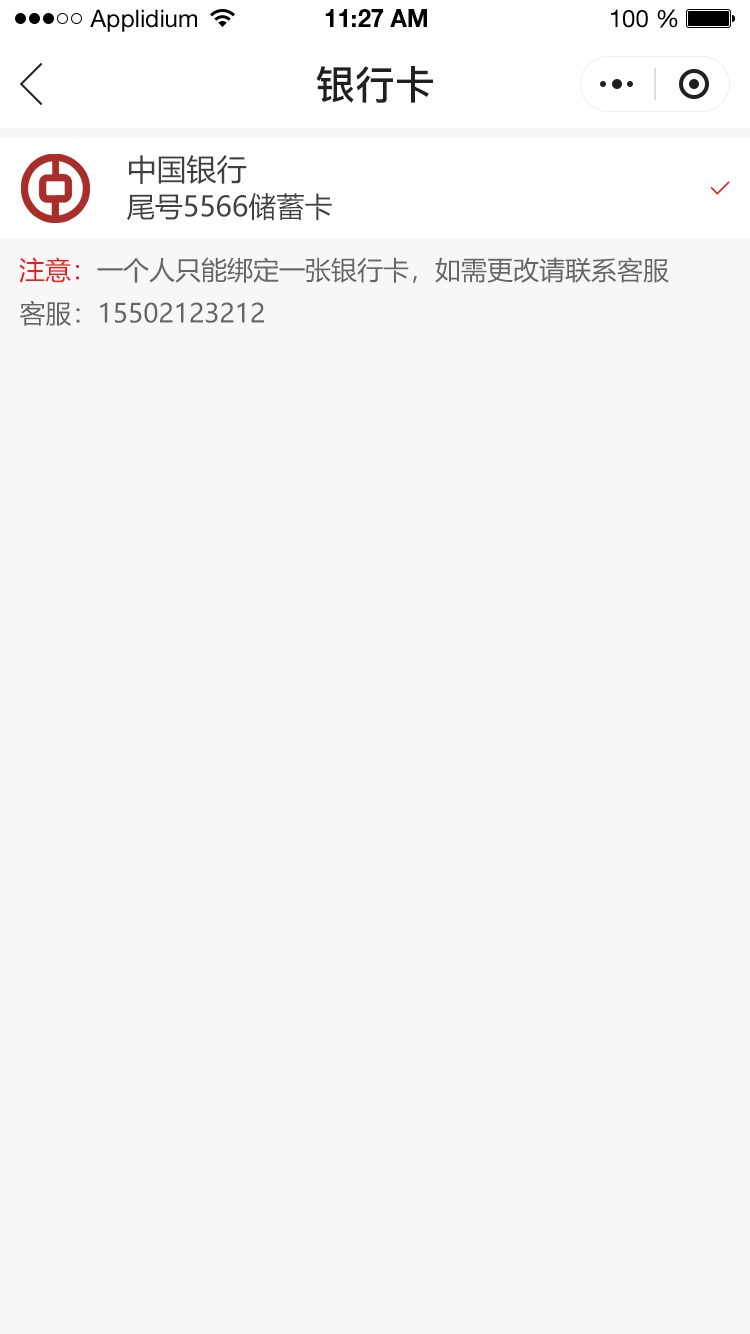
<style>
.page{position:relative;width:750px;height:1334px;background:#f7f7f7}
.page>*{position:absolute;margin:0}
.t1{font:24px "HelveticaNeueLTStd-Roman";color:#000000}
.t2{font:24px "HelveticaNeueLTStd-Bd";color:#000000}
.t3{font:40px "PingFang-SC-Bold";color:#202020;text-transform:uppercase}
.t4{font:30px "MicrosoftYaHei";color:#404040;text-transform:uppercase}
.t5{font:28px "MicrosoftYaHei";color:#404040;text-transform:uppercase}
.t6{font:26px "MicrosoftYaHei";color:#666666;text-transform:uppercase}
.t7{font:26px "MicrosoftYaHei";color:#e61f18;text-transform:uppercase}
</style>
<div class="page">
<p class="t1" style="left:90px;top:9px;width:107px;height:23px">Applidium</p>
<p class="t2" style="left:325px;top:9px;width:102px;height:18px">11:27 AM</p>
<p class="t1" style="left:611px;top:9px;width:67px;height:19px">100 %</p>
<p class="t3" style="left:316px;top:66px;width:117px;height:37px">银行卡</p>
<p class="t4" style="left:129px;top:155px;width:118px;height:29px">中国银行</p>
<p class="t5" style="left:127px;top:193px;width:205px;height:28px">尾号5566储蓄卡</p>
<p class="t6" style="left:19px;top:257px;width:650px;height:26px"><span class="t7">注意：</span>一个人只能绑定一张银行卡，如需更改请联系客服</p>
<p class="t6" style="left:19px;top:300px;width:245px;height:26px">客服：15502123212</p>
</div>
